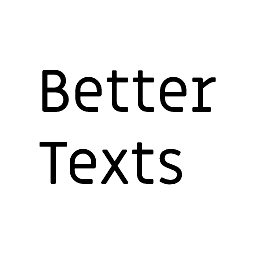
<style>
.page{position:relative;width:256px;height:256px;background:#ffffff}
.page>*{position:absolute;margin:0}
.t1{font:60px "MiriamLibre-Regular";color:#000000}
</style>
<div class="page">
<p class="t1" style="left:39px;top:70px;width:177px;height:115px">Better<br>Texts</p>
</div>
